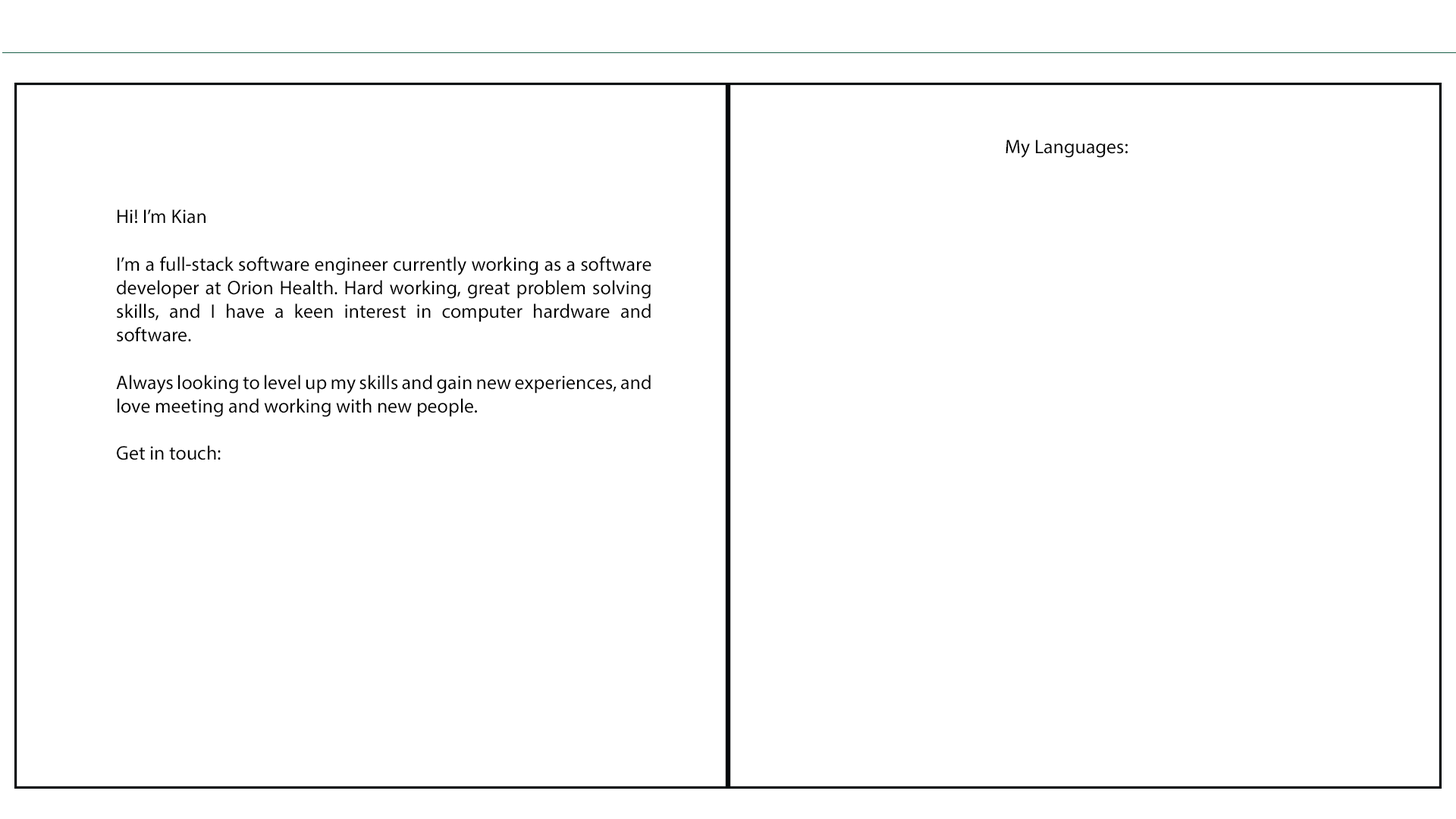
<style>
.page{position:relative;width:1456px;height:819px;background:#ffffff}
.page>*{position:absolute;margin:0}
.t1{font:19.7px "MyriadPro-Regular";color:#000000}
</style>
<div class="page">
<p class="t1" style="left:1006px;top:140px;width:122px;height:18px">My Languages:</p>
<p class="t1" style="left:116px;top:209px;width:535px;height:251px;text-align:justify">Hi! I’m Kian<br><br>I’m a full-stack software engineer currently working as a software developer at Orion Health. Hard working, great problem solving skills, and I have a keen interest in computer hardware and software.<br><br>Always looking to level up my skills and gain new experiences, and love meeting and working with new people. <br><br>Get in touch:</p>
</div>
